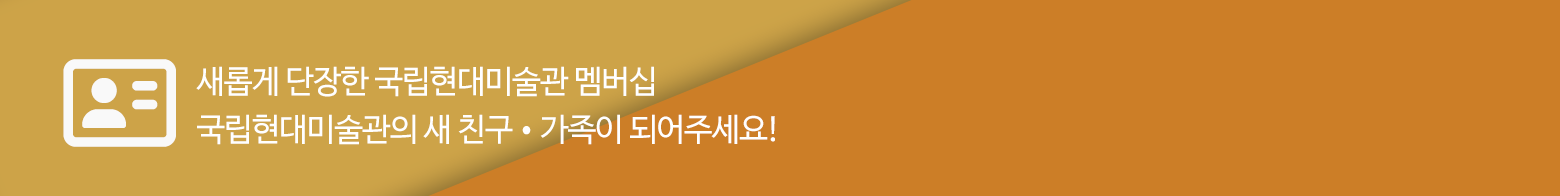
<style>
.page{position:relative;width:1560px;height:196px;background:#cc7e27}
.page>*{position:absolute;margin:0}
.t1{font:32px/48px "NanumBarunGothic";letter-spacing:-0.03em;color:#ffffff;text-transform:uppercase}
</style>
<div class="page">
<p class="t1" style="left:196px;top:66px;width:579px;height:79px">새롭게 단장한 국립현대미술관 멤버십<br>국립현대미술관의 새 친구•가족이 되어주세요!</p>
</div>
